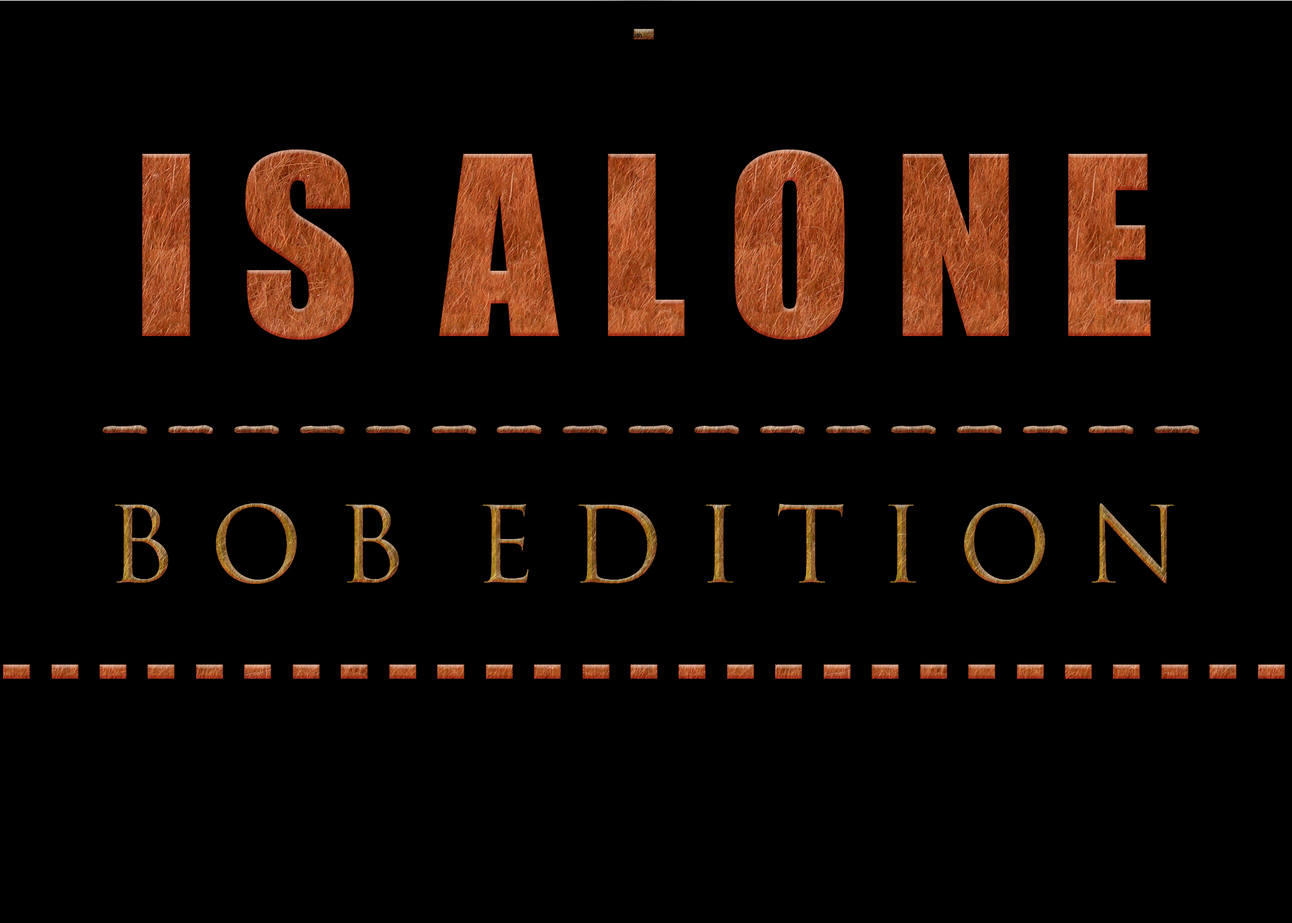
<style>
.page{position:relative;width:1292px;height:923px;background:#000000}
.page>*{position:absolute;margin:0}
.t1{font:102.5px "Impact"}
.t2{font:76.9px "Impact"}
.t3{font:230.7px "Impact"}
.t4{font:102.5px "SegoeScript"}
.t5{font:102.5px "TrajanColor-Concept"}
</style>
<div class="page">
<p class="t1" style="left:2px;top:29px;width:1283px;height:650px;text-align:center"><span class="t2">-<br></span><span class="t3">I S  A L O N E<br></span><span class="t4">-----------------<br></span><span class="t5">B O B  E D I T I O N<br></span>- - - - - - - - - - - - - - - - - - - - - - - - - - -</p>
</div>
